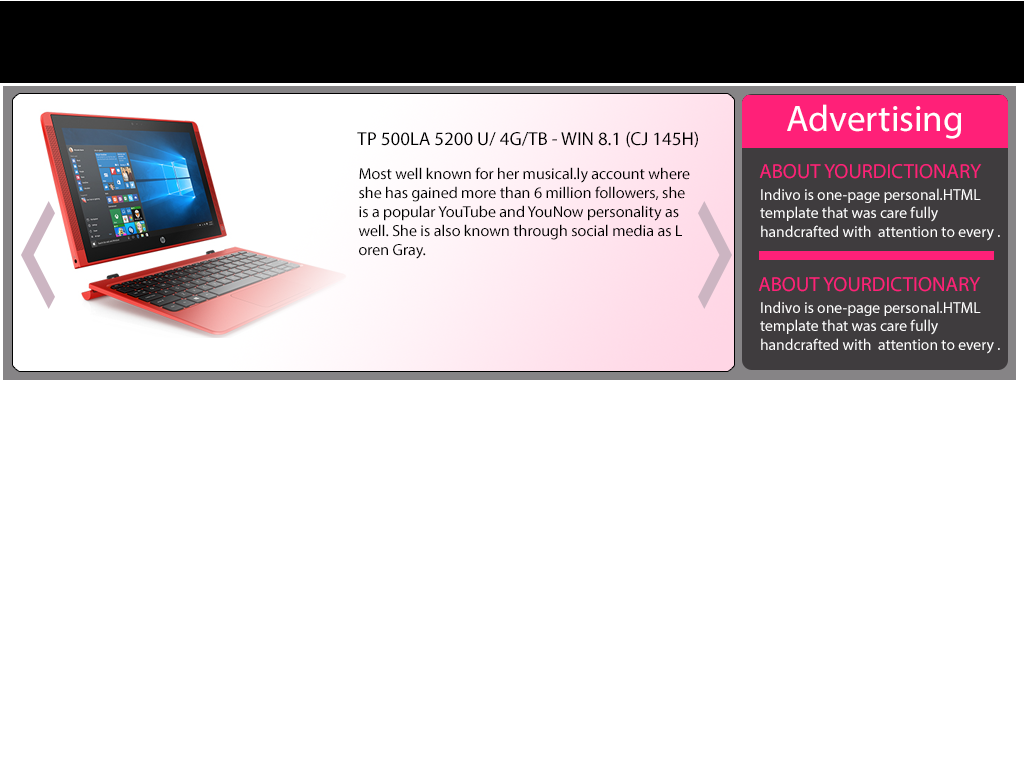
<style>
.page{position:relative;width:1024px;height:768px;background:#ffffff}
.page>*{position:absolute;margin:0}
.t1{font:37px "MyriadPro-Regular";color:#ffffff}
.t2{font:18.9px "MyriadPro-Regular";color:#000000}
.t3{font:16px "MyriadPro-Regular";color:#000000}
.t4{font:20.5px "MyriadPro-Regular";color:#ff2078}
.t5{font:15.6px "MyriadPro-Regular";color:#ffffff}
</style>
<div class="page">
<p class="t1" style="left:787px;top:104px;width:175px;height:35px">Advertising</p>
<p class="t2" style="left:357px;top:131px;width:341px;height:17px">TP 500LA 5200 U/ 4G/TB - WIN 8.1 (CJ 145H)</p>
<p class="t3" style="left:358px;top:167px;width:332px;height:92px">Most well known for her musical.ly account where <br>she has gained more than 6 million followers, she <br>is a popular YouTube and YouNow personality as <br>well. She is also known through social media as L<br>oren Gray.</p>
<p class="t4" style="left:759px;top:164px;width:223px;height:15px">ABOUT YOURDICTIONARY</p>
<p class="t5" style="left:760px;top:188px;width:240px;height:53px">Indivo is one-page personal.HTML <br>template that was care fully <br>handcrafted with  attention to every .</p>
<p class="t4" style="left:758px;top:277px;width:223px;height:15px">ABOUT YOURDICTIONARY</p>
<p class="t5" style="left:760px;top:301px;width:240px;height:53px">Indivo is one-page personal.HTML <br>template that was care fully <br>handcrafted with  attention to every .</p>
</div>
